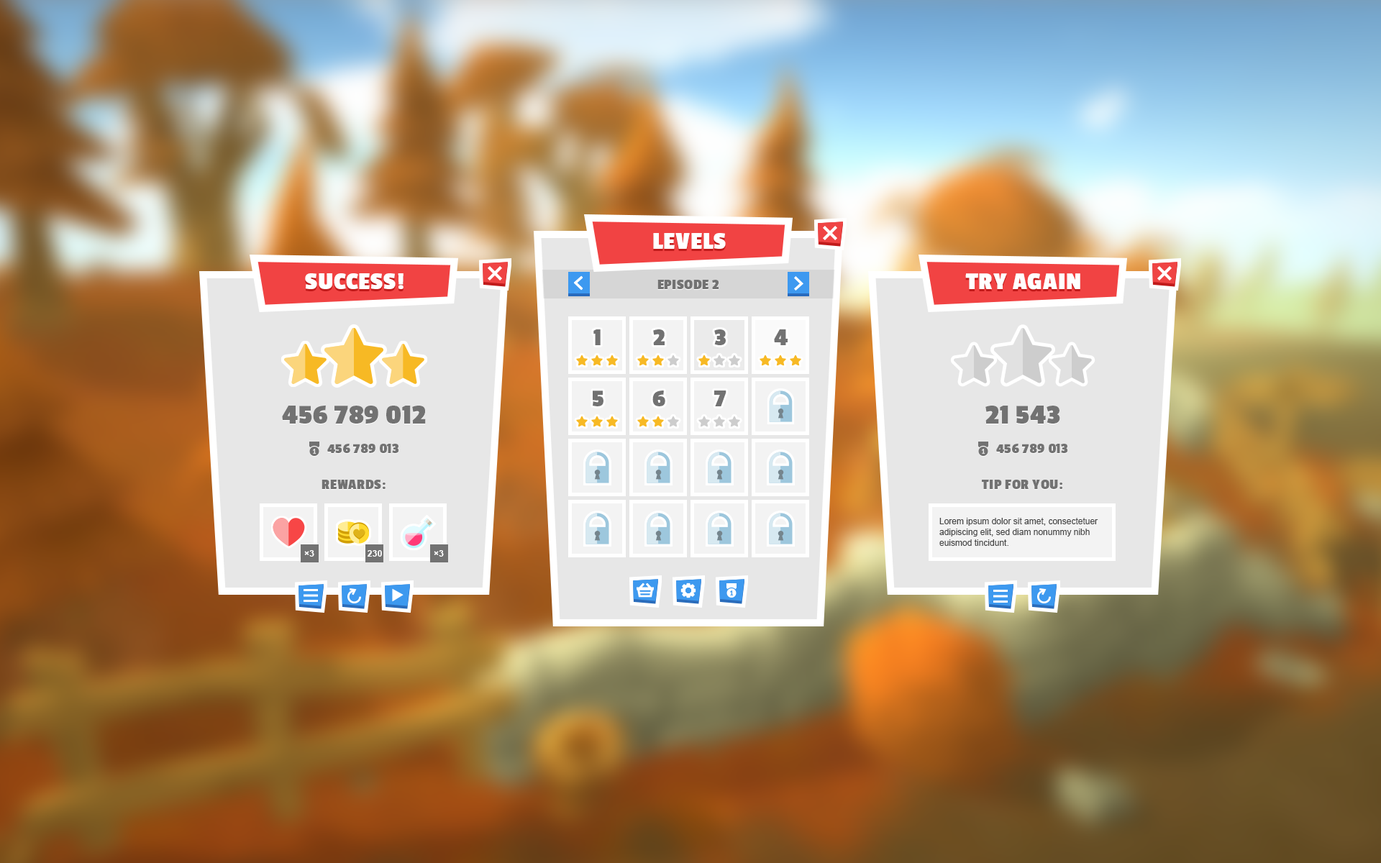
<style>
.page{position:relative;width:1381px;height:863px}
.page>*{position:absolute;margin:0}
.t1{font:25.2px "PassionOne-Bold";letter-spacing:0.025em;color:#ffffff;text-transform:uppercase}
.t2{font:14.4px "PassionOne-Bold";letter-spacing:0.025em;color:#ffffff;text-transform:uppercase}
.t3{font:25.2px "PassionOne-Bold";letter-spacing:0.025em;color:#727272;text-transform:uppercase}
.t4{font:28.8px "PassionOne-Bold";letter-spacing:0.025em;color:#727272;text-transform:uppercase}
.t5{font:14.4px "PassionOne-Bold";letter-spacing:0.025em;color:#727272;text-transform:uppercase}
.t6{font:8.6px/10.8px "ArialMT";color:#454545}
.t7{font:8.6px "Arial-BoldMT";letter-spacing:0.025em;color:#ffffff;text-transform:uppercase}
</style>
<div class="page">
<p class="t1" style="left:653px;top:233px;width:73px;height:16px">levels</p>
<p class="t1" style="left:305px;top:273px;width:99px;height:16px">Success!</p>
<p class="t2" style="left:658px;top:280px;width:61px;height:9px">Episode 2</p>
<p class="t1" style="left:965px;top:273px;width:116px;height:17px">try again</p>
<p class="t3" style="left:594px;top:329px;width:7px;height:16px">1</p>
<p class="t3" style="left:653px;top:329px;width:12px;height:16px">2</p>
<p class="t3" style="left:714px;top:329px;width:12px;height:16px">3</p>
<p class="t3" style="left:774px;top:329px;width:14px;height:16px">4</p>
<p class="t3" style="left:593px;top:391px;width:11px;height:15px">5</p>
<p class="t3" style="left:653px;top:391px;width:12px;height:15px">6</p>
<p class="t3" style="left:714px;top:391px;width:13px;height:15px">7</p>
<p class="t4" style="left:282px;top:406px;width:144px;height:18px">456 789 012</p>
<p class="t4" style="left:986px;top:406px;width:74px;height:18px">21 543</p>
<p class="t5" style="left:327px;top:444px;width:72px;height:9px">456 789 013</p>
<p class="t5" style="left:996px;top:444px;width:72px;height:9px">456 789 013</p>
<p class="t5" style="left:322px;top:480px;width:64px;height:9px">Rewards:</p>
<p class="t5" style="left:982px;top:480px;width:81px;height:9px">TiP for you:</p>
<p class="t6" style="left:940px;top:518px;width:159px;height:28px">Lorem ipsum dolor sit amet, consectetuer adipiscing elit, sed diam nonummy nibh euismod tincidunt.</p>
<p class="t7" style="left:304px;top:550px;width:10px;height:7px">×3</p>
<p class="t7" style="left:368px;top:550px;width:14px;height:7px">230</p>
<p class="t7" style="left:434px;top:550px;width:10px;height:7px">×3</p>
</div>
